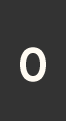
<style>
.page{position:relative;width:66px;height:121px;background:#333333}
.page>*{position:absolute;margin:0}
.t1{font:50px "PollyRounded-Bold";color:#fffbf3}
</style>
<div class="page">
<p class="t1" style="left:20px;top:47px;width:26px;height:35px">0</p>
</div>
